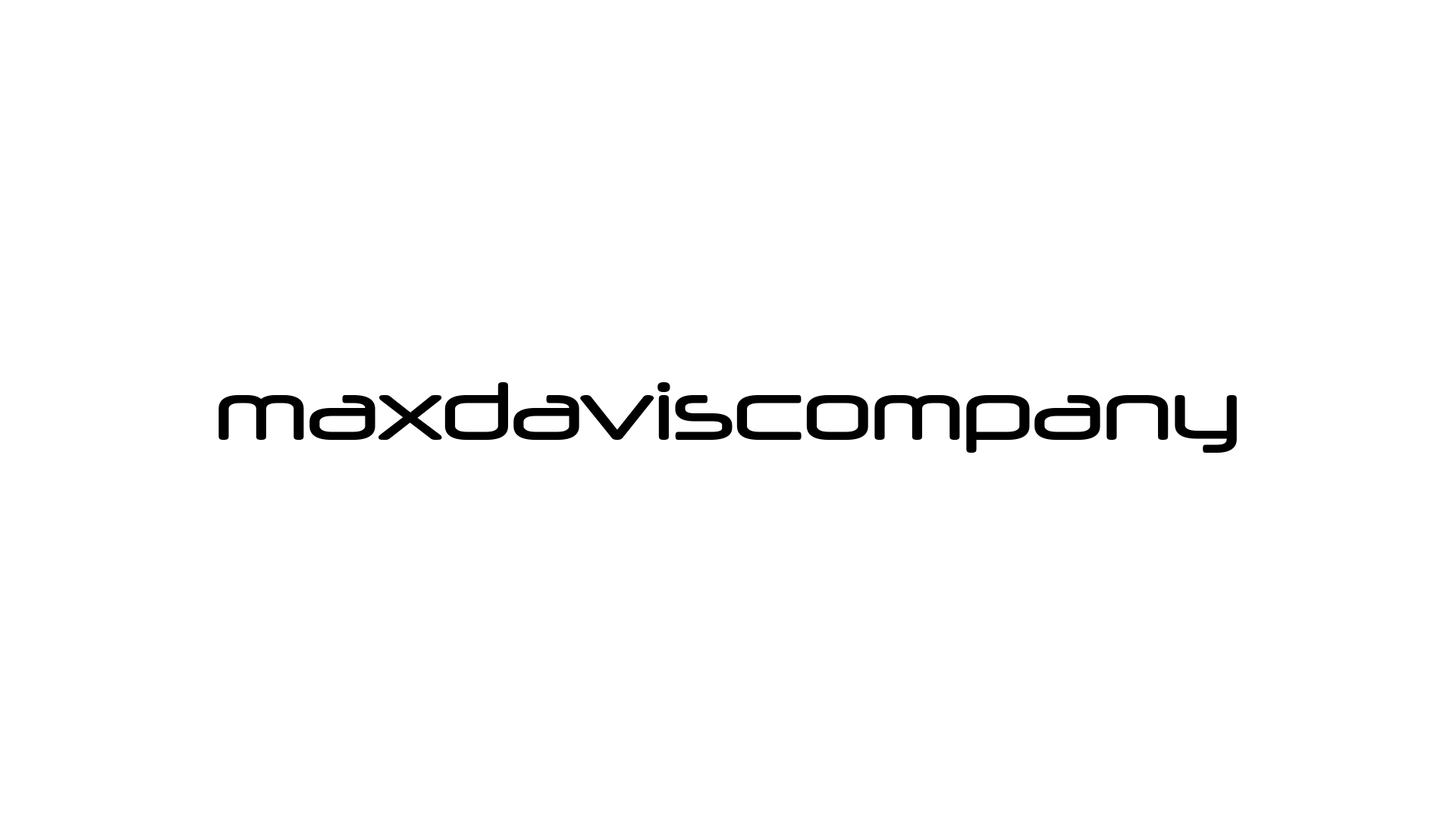
<style>
.page{position:relative;width:1456px;height:819px;background:#ffffff}
.page>*{position:absolute;margin:0}
.t1{font:78.2px "Neuropol-Regular";color:#000000}
</style>
<div class="page">
<p class="t1" style="left:218px;top:382px;width:1019px;height:71px">maxdaviscompany</p>
</div>
